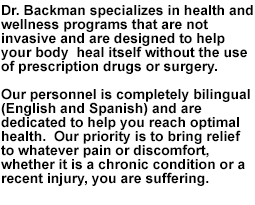
<style>
.page{position:relative;width:255px;height:205px;background:#ffffff}
.page>*{position:absolute;margin:0}
.t1{font:14px/14px "Arial-BoldMT";color:#000000}
</style>
<div class="page">
<p class="t1" style="left:1px;top:5px;width:252px;height:181px">Dr. Backman specializes in health and wellness programs that are not <br>invasive and are designed to help your body  heal itself without the use of prescription drugs or surgery.<br><br>Our personnel is completely bilingual (English and Spanish) and are <br>dedicated to help you reach optimal health.  Our priority is to bring relief to whatever pain or discomfort, <br>whether it is a chronic condition or a recent injury, you are suffering.</p>
</div>
